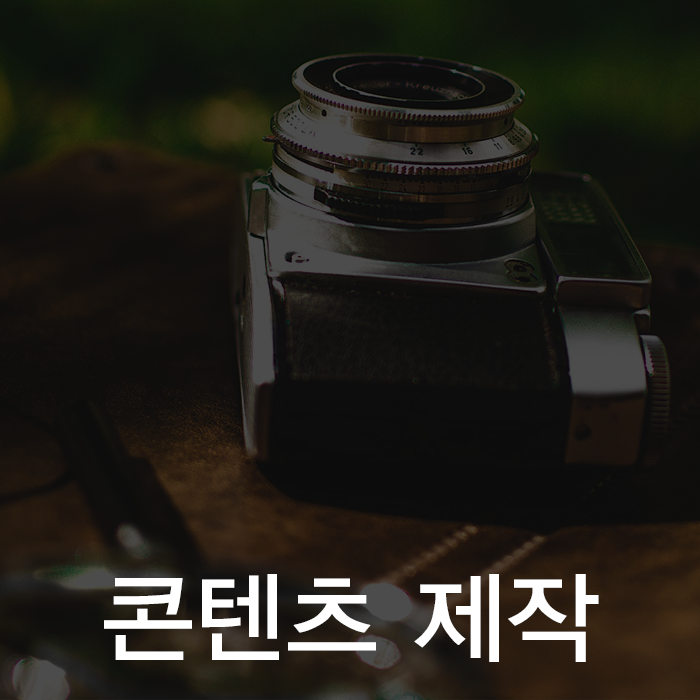
<style>
.page{position:relative;width:700px;height:700px}
.page>*{position:absolute;margin:0}
.t1{font:100px "YDIYGO330";color:#ffffff}
</style>
<div class="page">
<p class="t1" style="left:104px;top:574px;width:495px;height:88px">콘텐츠 제작</p>
</div>
